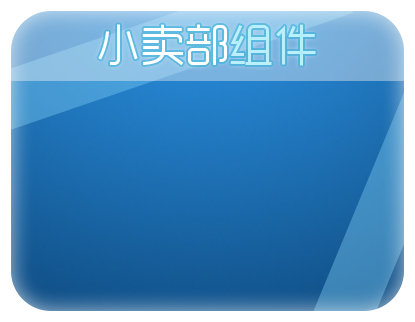
<style>
.page{position:relative;width:415px;height:322px}
.page>*{position:absolute;margin:0}
.t1{font:44.3px "RTWSYueGoTrial-Regular"}
</style>
<div class="page">
<p class="t1" style="left:98px;top:24px;width:218px;height:42px">小卖部组件</p>
</div>
